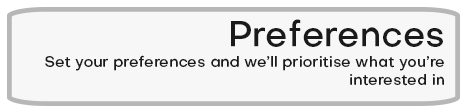
<style>
.page{position:relative;width:466px;height:111px;background:#f7f7f7}
.page>*{position:absolute;margin:0}
.t1{font:15px "Objectivity-Medium";color:#1a1a1a}
</style>
<div class="page">
<p class="t1" style="left:45px;top:55px;width:399px;height:31px;text-align:right">Set your preferences and we’ll prioritise what you’re interested in</p>
</div>
